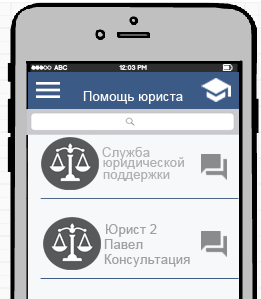
<style>
.page{position:relative;width:261px;height:299px;background:#f7f8fa}
.page>*{position:absolute;margin:0}
.t1{font:13.3px "ArialMT";color:#fcfafa}
.t2{font:13.3px "ArialMT";color:#b1b0b0}
.t3{font:13.3px "ArialMT";color:#a29f9f}
</style>
<div class="page">
<p class="t1" style="left:83px;top:91px;width:100px;height:13px">Помощь юриста</p>
<p class="t2" style="left:102px;top:147px;width:48px;height:13px">Служба</p>
<p class="t2" style="left:103px;top:157px;width:81px;height:13px">юридической</p>
<p class="t2" style="left:103px;top:172px;width:67px;height:10px">поддержки</p>
<p class="t3" style="left:106px;top:224px;width:51px;height:13px">Юрист 2</p>
<p class="t3" style="left:104px;top:239px;width:39px;height:10px">Павел</p>
<p class="t3" style="left:104px;top:254px;width:86px;height:13px">Консультация</p>
</div>
